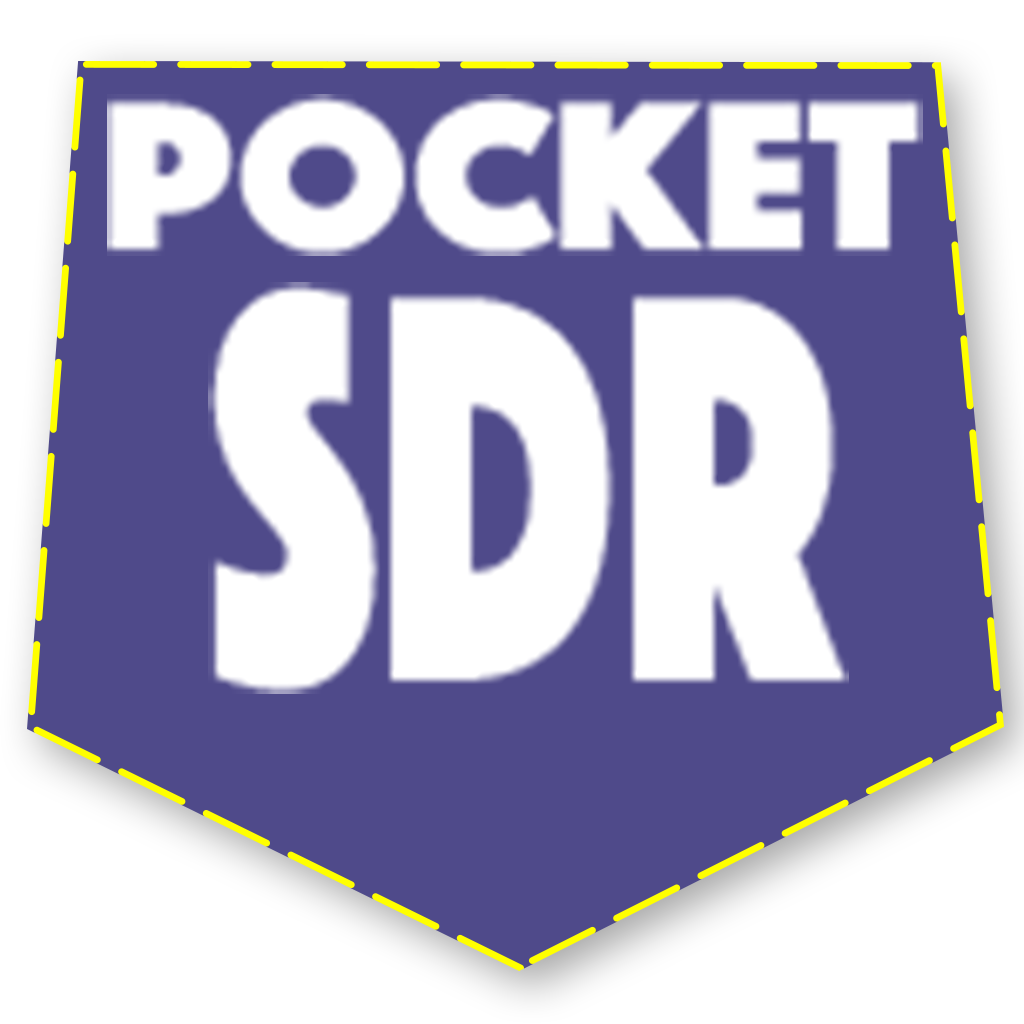
<style>
.page{position:relative;width:1024px;height:1024px;background:#4f4a8a}
.page>*{position:absolute;margin:0}
.t1{font:218.8px "Phosphate-Solid";color:#ffffff;scale:1.07 1}
.t2{font:575px "Phosphate-Solid";color:#ffffff;scale:0.65 1}
</style>
<div class="page">
<p class="t1" style="left:107px;top:94px;width:816px;height:162px">Pocket</p>
<p class="t2" style="left:208px;top:282px;width:641px;height:412px">SDR</p>
</div>
